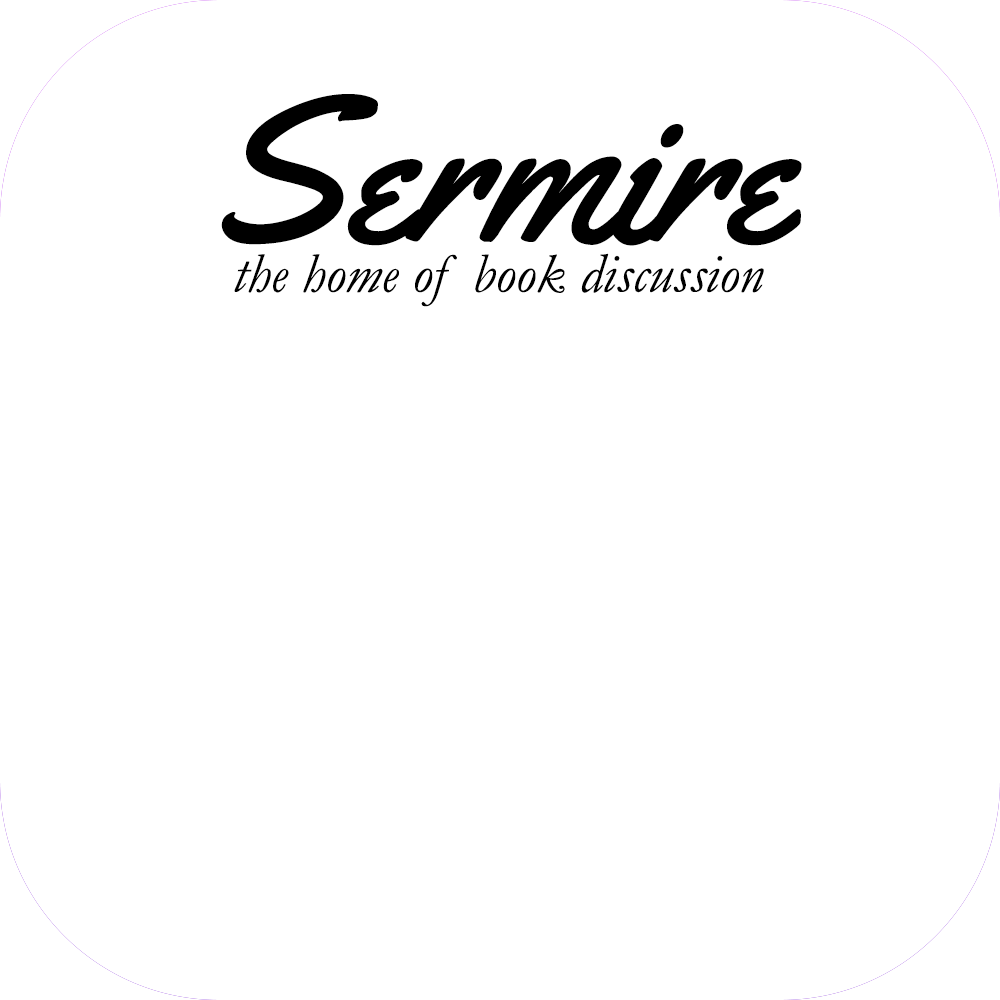
<style>
.page{position:relative;width:1000px;height:1000px;background:#ffffff}
.page>*{position:absolute;margin:0}
.t1{font:356px "Yellowtail";color:#000000}
.t2{font:98px "Garamond-Italic";color:#000000}
</style>
<div class="page">
<p class="t1" style="left:221px;top:94px;width:581px;height:152px">Sermire</p>
<p class="t2" style="left:234px;top:253px;width:530px;height:54px">the home of book discussion</p>
</div>
